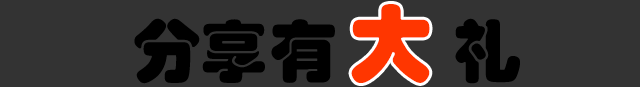
<style>
.page{position:relative;width:640px;height:87px;background:#333333}
.page>*{position:absolute;margin:0}
.t1{font:84px "STHupo";color:#ff3600}
.t2{font:68.1px "STHupo";color:#000000}
</style>
<div class="page">
<p class="t1" style="left:351px;top:4px;width:79px;height:79px">大</p>
<p class="t2" style="left:134px;top:18px;width:386px;height:66px">分享有       礼</p>
</div>
